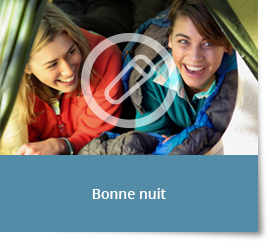
<style>
.page{position:relative;width:270px;height:250px;background:#538ca6}
.page>*{position:absolute;margin:0}
.t1{font:14px "OpenSans-Semibold";color:#ffffff}
</style>
<div class="page">
<p class="t1" style="left:92px;top:188px;width:74px;height:11px">Bonne nuit</p>
</div>
